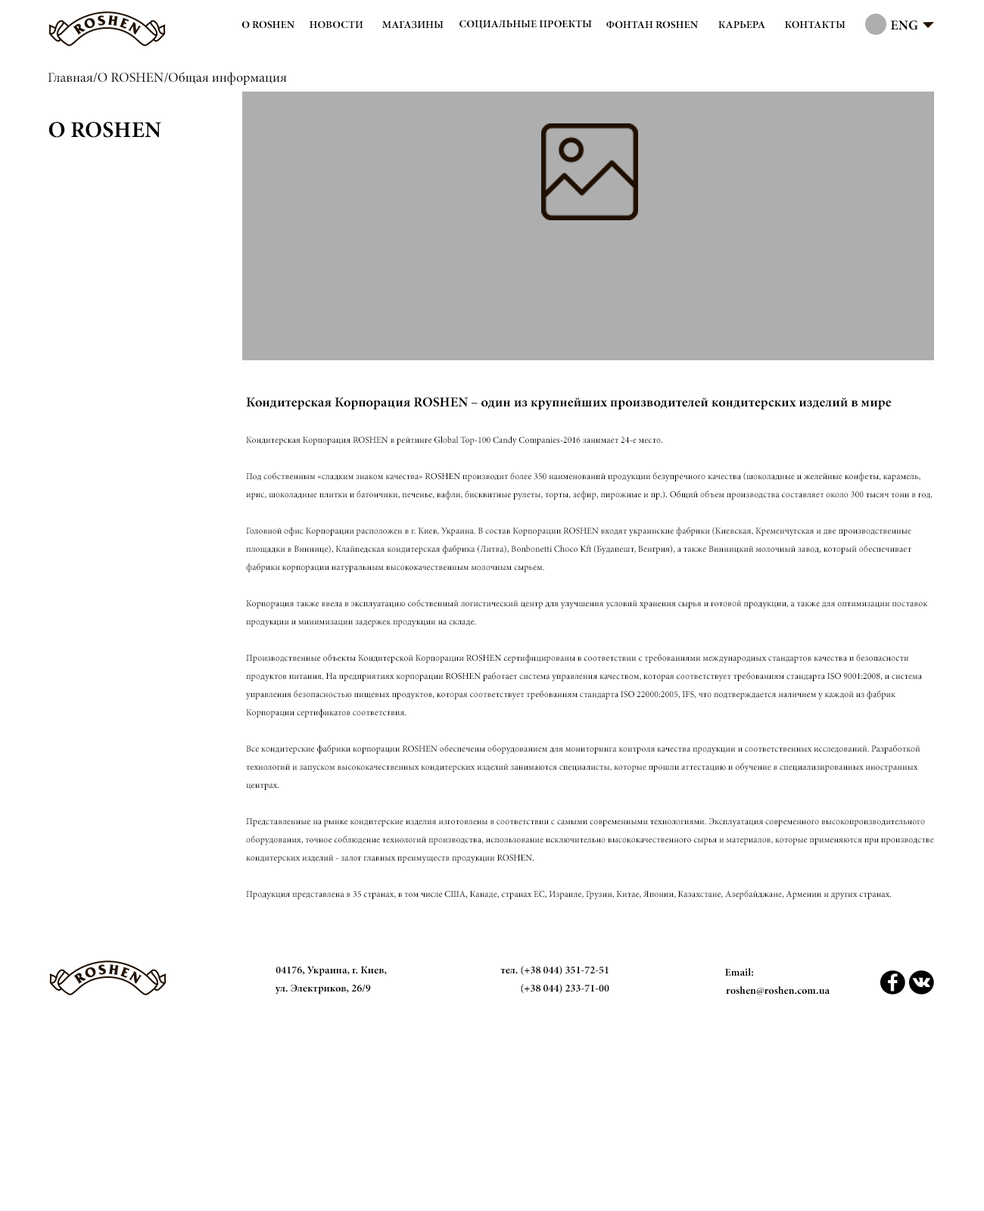
<style>
.page{position:relative;width:984px;height:1211px;background:#ffffff}
.page>*{position:absolute;margin:0}
.t1{font:10.6px "MinionPro-Bold";color:#000000}
.t2{font:10.6px "MinionPro-Bold";color:#0b0b0b}
.t3{font:13.6px "MinionPro-Bold";color:#000000}
.t4{font:13.6px "MinionPro-Regular";color:#050505}
.t5{font:22.7px "MinionPro-Bold";color:#050505}
.t6{font:9.1px/18.2px "MinionPro-Regular";color:#000000}
.t7{font:13.6px/18.2px "MinionPro-Bold";color:#000000}
.t8{font:10.6px/18.2px "MinionPro-Bold";color:#000000}
</style>
<div class="page">
<p class="t1" style="left:242px;top:20px;width:53px;height:9px">О ROSHEN</p>
<p class="t2" style="left:310px;top:20px;width:53px;height:9px">НОВОСТИ</p>
<p class="t1" style="left:382px;top:20px;width:62px;height:9px">МАГАЗИНЫ</p>
<p class="t1" style="left:460px;top:20px;width:132px;height:10px">СОЦИАЛЬНЫЕ ПРОЕКТЫ</p>
<p class="t1" style="left:606px;top:20px;width:92px;height:9px">ФОНТАН ROSHEN</p>
<p class="t1" style="left:719px;top:20px;width:46px;height:8px">КАРЬЕРА</p>
<p class="t1" style="left:785px;top:20px;width:61px;height:9px">КОНТАКТЫ</p>
<p class="t3" style="left:890px;top:20px;width:28px;height:10px">ENG</p>
<p class="t4" style="left:48px;top:72px;width:239px;height:14px">Главная/О ROSHEN/Общая информация</p>
<p class="t5" style="left:48px;top:122px;width:113px;height:16px">О ROSHEN</p>
<p class="t6" style="left:246px;top:398px;width:688px;height:502px"><span class="t7">Кондитерская Корпорация ROSHEN – один из крупнейших производителей кондитерских изделий в мире<br></span><br>Кондитерская Корпорация ROSHEN в рейтинге Global Top-100 Candy Companies-2016 занимает 24-е место.<br><br>Под собственным «сладким знаком качества» ROSHEN производит более 350 наименований продукции безупречного качества (шоколадные и желейные конфеты, карамель, ирис, шоколадные плитки и батончики, печенье, вафли, бисквитные рулеты, торты, зефир, пирожные и пр.). Общий объем производства составляет около 300 тысяч тонн в год.<br><br>Головной офис Корпорации расположен в г. Киев, Украина. В состав Корпорации ROSHEN входят украинские фабрики (Киевская, Кременчугская и две производственные площадки в Виннице), Клайпедская кондитерская фабрика (Литва), Bonbonetti Choco Kft (Будапешт, Венгрия), а также Винницкий молочный завод, который обеспечивает фабрики корпорации натуральным высококачественным молочным сырьем.<br><br>Корпорация также ввела в эксплуатацию собственный логистический центр для улучшения условий хранения сырья и готовой продукции, а также для оптимизации поставок продукции и минимизации задержек продукции на складе.<br><br>Производственные объекты Кондитерской Корпорации ROSHEN сертифицированы в соответствии с требованиями международных стандартов качества и безопасности продуктов питания. На предприятиях корпорации ROSHEN работает система управления качеством, которая соответствует требованиям стандарта ISO 9001:2008, и система управления безопасностью пищевых продуктов, которая соответствует требованиям стандарта ISO 22000:2005, IFS, что подтверждается наличием у каждой из фабрик Корпорации сертификатов соответствия.<br><br>Все кондитерские фабрики корпорации ROSHEN обеспечены оборудованием для мониторинга контроля качества продукции и соответственных исследований. Разработкой технологий и запуском высококачественных кондитерских изделий занимаются специалисты, которые прошли аттестацию и обучение в специализированных иностранных центрах.<br><br>Представленные на рынке кондитерские изделия изготовлены в соответствии с самыми современными технологиями. Эксплуатация современного высокопроизводительного оборудования, точное соблюдение технологий производства, использование исключительно высококачественного сырья и материалов, которые применяются при производстве кондитерских изделий - залог главных преимуществ продукции ROSHEN.<br><br>Продукция представлена в 35 странах, в том числе США, Канаде, странах ЕС, Израиле, Грузии, Китае, Японии, Казахстане, Азербайджане, Армении и других странах.</p>
<p class="t8" style="left:275px;top:966px;width:112px;height:29px;text-align:right">04176, Украина, г. Киев,<br>ул. Электриков, 26/9</p>
<p class="t8" style="left:500px;top:966px;width:110px;height:28px;text-align:right">тел. (+38 044) 351-72-51<br>(+38 044) 233-71-00</p>
<p class="t8" style="left:725px;top:968px;width:105px;height:28px;text-align:right">Email:                                 <br>roshen@roshen.com.ua</p>
</div>
